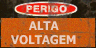
<style>
.page{position:relative;width:96px;height:48px}
.page>*{position:absolute;margin:0}
.t1{font:9px "Helvetica-Bold";letter-spacing:0.02em;text-transform:uppercase;font-weight:bold;scale:1.1 1}
.t2{font:11.9px/14px "Tahoma-Bold";letter-spacing:-0.02em;color:#e8ccbe;text-transform:uppercase}
</style>
<div class="page">
<p class="t1" style="left:26px;top:5px;width:41px;height:8px">PERIGO</p>
<p class="t2" style="left:11px;top:21px;width:65px;height:24px;text-align:center">ALTA<br>VOLTAGEM</p>
</div>
